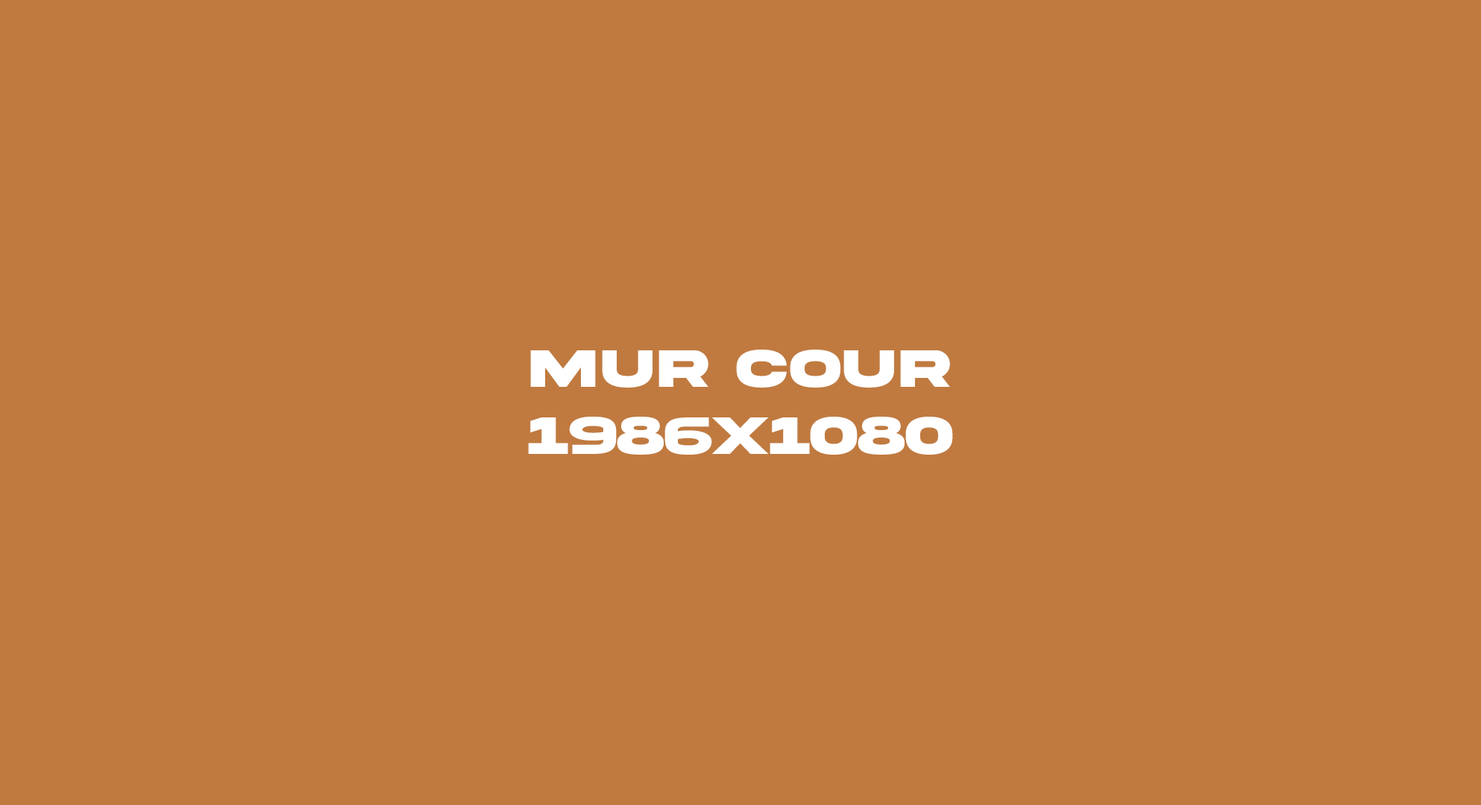
<style>
.page{position:relative;width:1481px;height:805px;background:#c07a3f}
.page>*{position:absolute;margin:0}
.t1{font:55.9px "AkiraExpanded-SuperBold";color:#ffffff}
</style>
<div class="page">
<p class="t1" style="left:528px;top:350px;width:425px;height:105px;text-align:center">Mur Cour<br>1986x1080</p>
</div>
